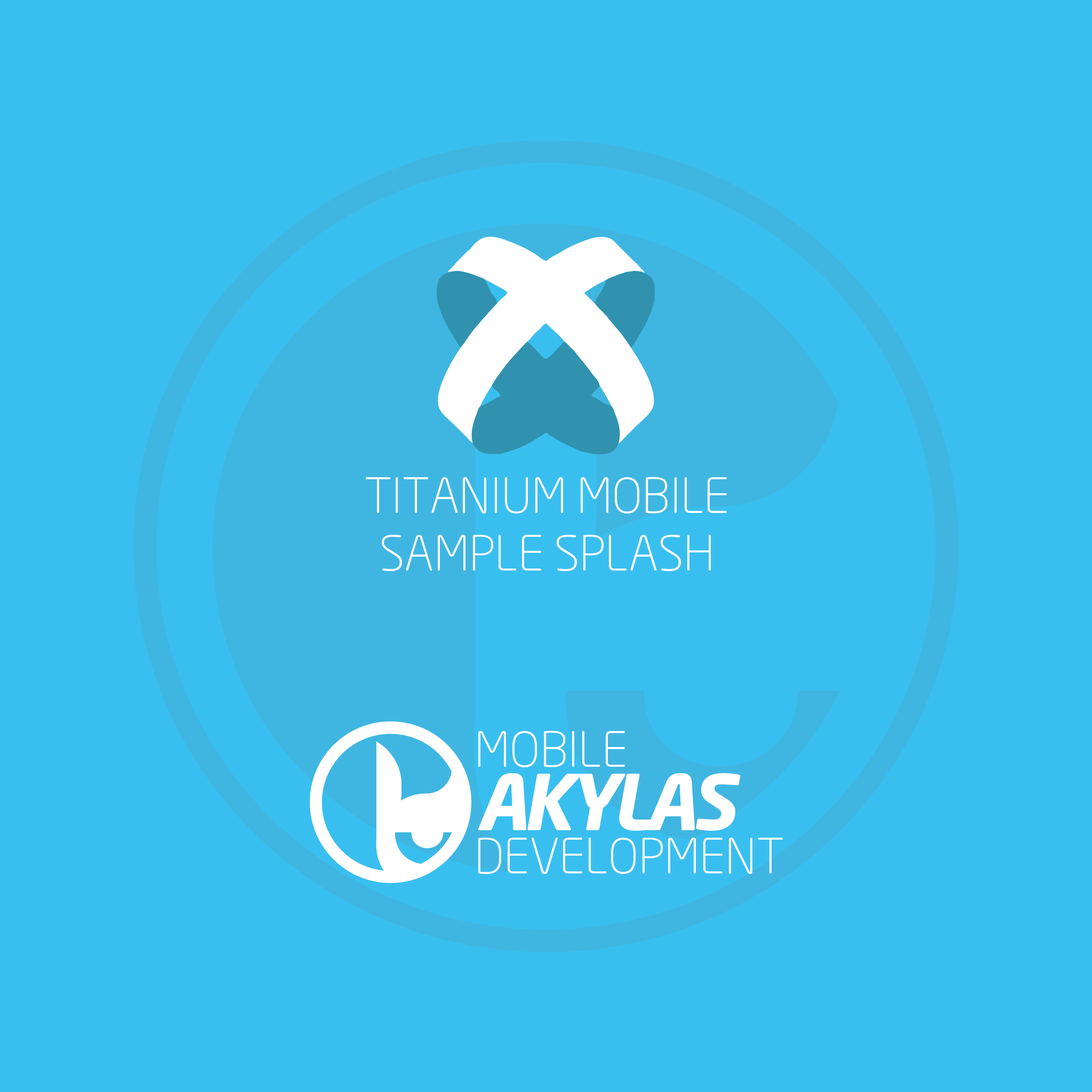
<style>
.page{position:relative;width:1092px;height:1092px;background:#39bfef}
.page>*{position:absolute;margin:0}
.t1{font:48px "NeoSans-Light";color:#ffffff;text-transform:uppercase}
.t2{font:76.2px "NeoSans-BoldItalic";letter-spacing:-0.075em;color:#ffffff;text-transform:uppercase}
</style>
<div class="page">
<p class="t1" style="left:366px;top:477px;width:361px;height:94px;text-align:center">Titanium Mobile<br>Sample Splash</p>
<p class="t1" style="left:478px;top:730px;width:147px;height:37px">mobile</p>
<p class="t2" style="left:478px;top:773px;width:263px;height:58px">akylas</p>
<p class="t1" style="left:478px;top:838px;width:305px;height:36px">development</p>
</div>
